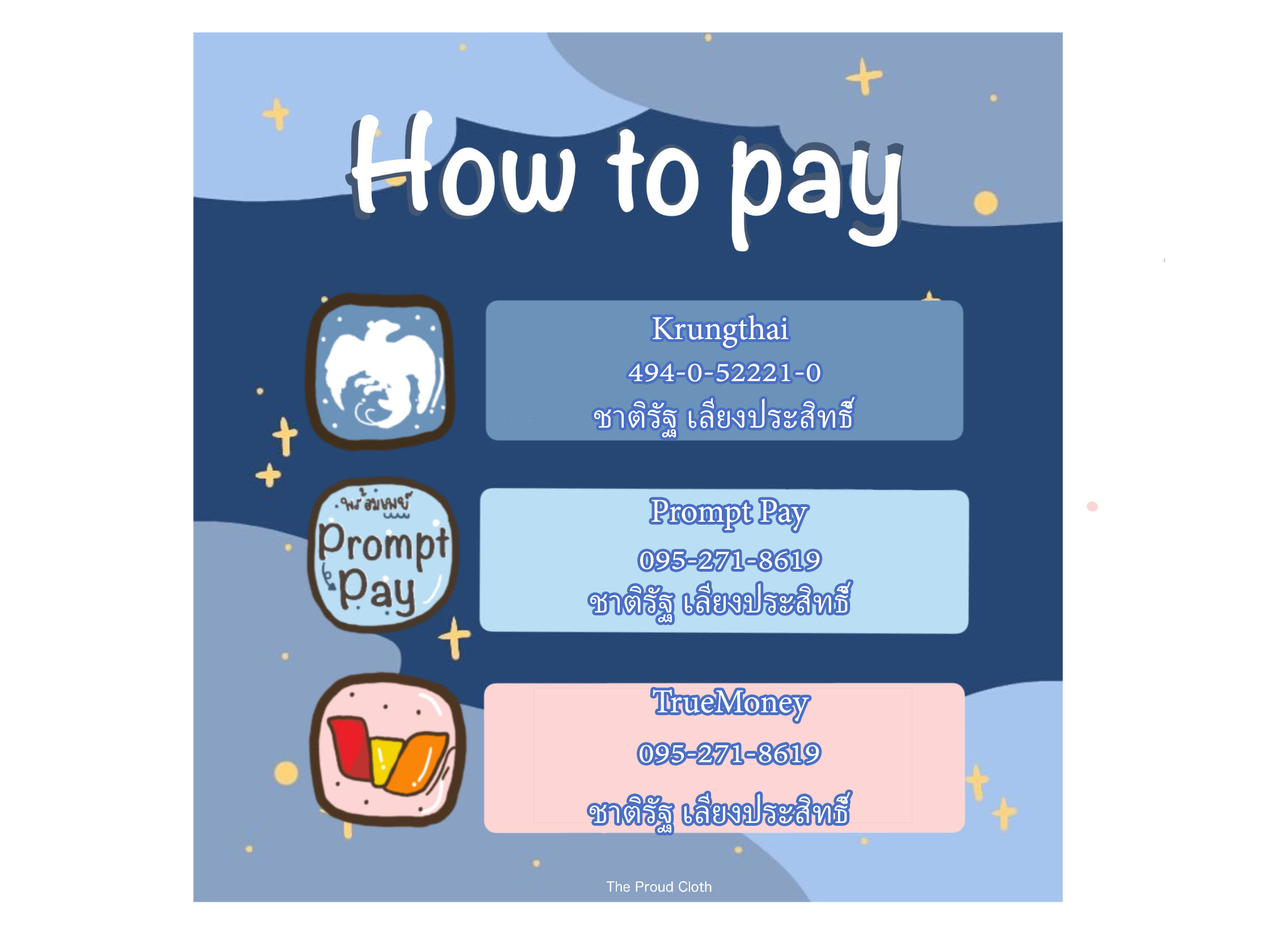
<style>
.page{position:relative;width:1261px;height:946px;background:#ffffff}
.page>*{position:absolute;margin:0}
.t1{font:40.8px "AdobeThai-Regular";color:#ffffff}
</style>
<div class="page">
<p class="t1" style="left:653px;top:315px;width:136px;height:33px">Krungthai</p>
<p class="t1" style="left:628px;top:363px;width:192px;height:19px">494-0-52221-0</p>
<p class="t1" style="left:594px;top:397px;width:261px;height:41px">ชาติรัฐ เลียงประสิทธิ์</p>
<p class="t1" style="left:651px;top:499px;width:156px;height:32px">Prompt Pay</p>
<p class="t1" style="left:640px;top:551px;width:180px;height:18px">095-271-8619</p>
<p class="t1" style="left:590px;top:582px;width:261px;height:41px">ชาติรัฐ เลียงประสิทธิ์</p>
<p class="t1" style="left:653px;top:689px;width:156px;height:32px">TrueMoney</p>
<p class="t1" style="left:640px;top:744px;width:179px;height:19px">095-271-8619</p>
<p class="t1" style="left:590px;top:792px;width:260px;height:41px">ชาติรัฐ เลียงประสิทธิ์</p>
</div>
